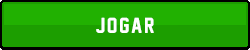
<style>
.page{position:relative;width:250px;height:50px;background:#1c9e00}
.page>*{position:absolute;margin:0}
.t1{font:20px "Jetpackia";letter-spacing:0.1em;color:#ffffff;text-transform:uppercase}
</style>
<div class="page">
<p class="t1" style="left:96px;top:17px;width:58px;height:16px">Jogar</p>
</div>
